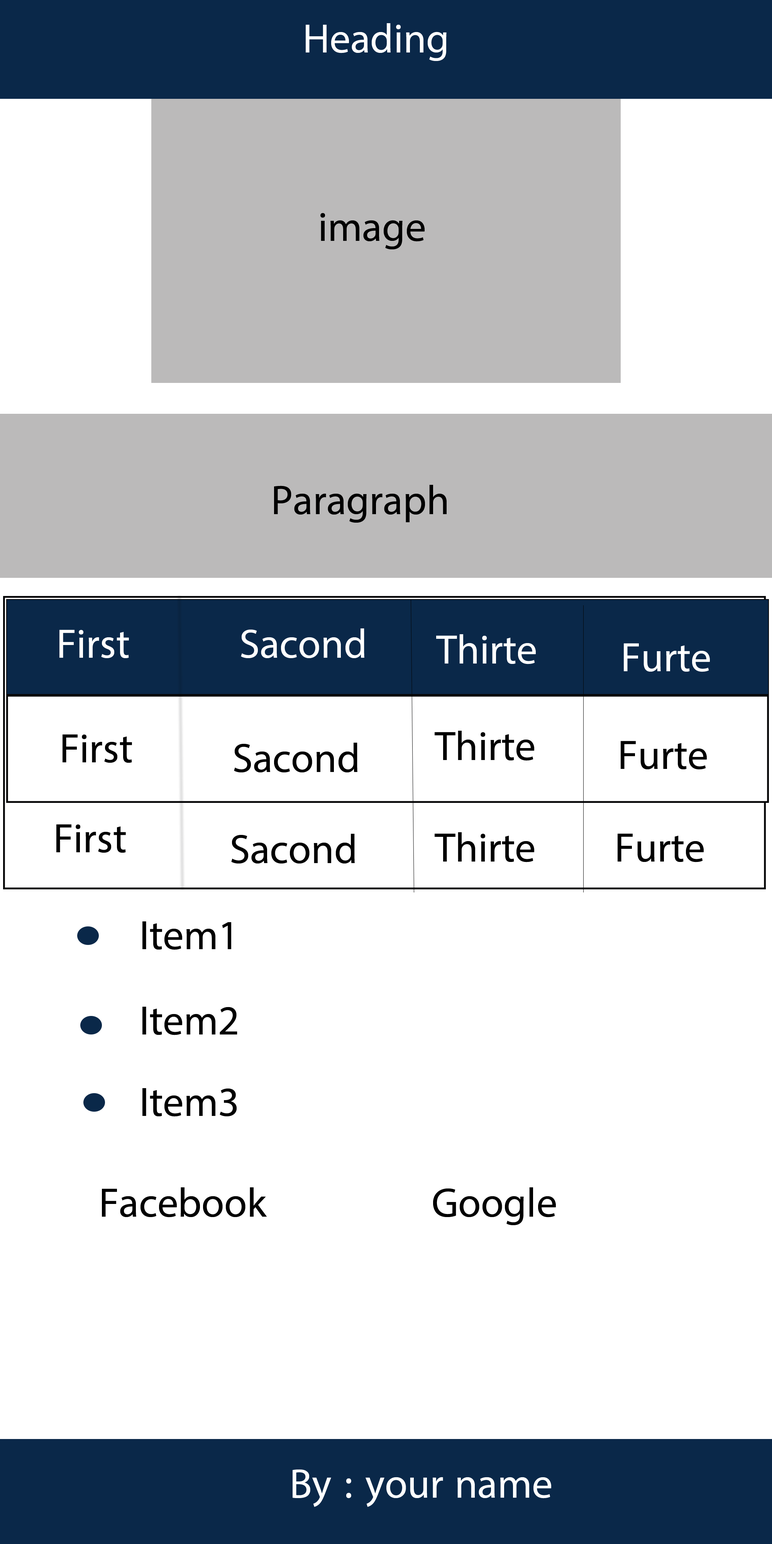
<style>
.page{position:relative;width:772px;height:1544px;background:#ffffff}
.page>*{position:absolute;margin:0}
.t1{font:57.9px "MyriadArabic-Regular";color:#ffffff}
.t2{font:57.9px "MyriadArabic-Regular";color:#000000}
</style>
<div class="page">
<p class="t1" style="left:306px;top:23px;width:141px;height:38px">Heading</p>
<p class="t2" style="left:320px;top:213px;width:105px;height:36px">image</p>
<p class="t2" style="left:274px;top:485px;width:173px;height:38px">Paragraph</p>
<p class="t1" style="left:59px;top:630px;width:70px;height:28px">First</p>
<p class="t1" style="left:241px;top:629px;width:123px;height:29px">Sacond</p>
<p class="t1" style="left:436px;top:634px;width:100px;height:30px">Thirte</p>
<p class="t1" style="left:624px;top:643px;width:86px;height:29px">Furte</p>
<p class="t2" style="left:63px;top:734px;width:69px;height:29px">First</p>
<p class="t2" style="left:435px;top:731px;width:99px;height:30px">Thirte</p>
<p class="t2" style="left:234px;top:743px;width:124px;height:30px">Sacond</p>
<p class="t2" style="left:621px;top:741px;width:86px;height:29px">Furte</p>
<p class="t2" style="left:56px;top:824px;width:70px;height:29px">First</p>
<p class="t2" style="left:231px;top:834px;width:124px;height:30px">Sacond</p>
<p class="t2" style="left:435px;top:832px;width:99px;height:30px">Thirte</p>
<p class="t2" style="left:618px;top:834px;width:86px;height:28px">Furte</p>
<p class="t2" style="left:142px;top:922px;width:89px;height:28px">Item1</p>
<p class="t2" style="left:142px;top:1007px;width:95px;height:28px">Item2</p>
<p class="t2" style="left:142px;top:1088px;width:95px;height:29px">Item3</p>
<p class="t2" style="left:102px;top:1188px;width:454px;height:37px">Facebook               Google</p>
<p class="t1" style="left:293px;top:1469px;width:258px;height:38px">By : your name</p>
</div>
